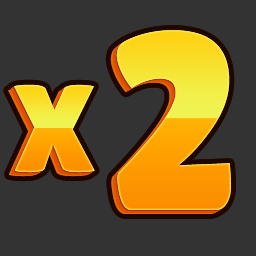
<style>
.page{position:relative;width:256px;height:256px;background:#333333}
.page>*{position:absolute;margin:0}
.t1{font:253px "LilitaOne"}
.t2{font:123.7px "LilitaOne"}
</style>
<div class="page">
<p class="t1" style="left:116px;top:30px;width:115px;height:180px">2</p>
<p class="t2" style="left:14px;top:84px;width:81px;height:89px">X</p>
</div>
